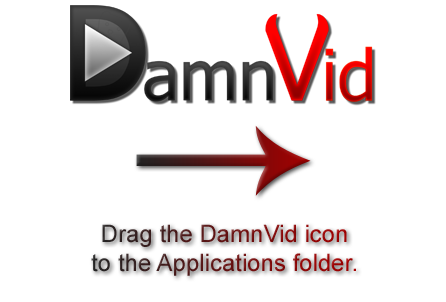
<style>
.page{position:relative;width:446px;height:302px;background:#ffffff}
.page>*{position:absolute;margin:0}
.t1{font:24px "ArialMT"}
</style>
<div class="page">
<p class="t1" style="left:91px;top:224px;width:265px;height:52px;text-align:center">Drag the DamnVid icon<br>to the Applications folder.</p>
</div>
